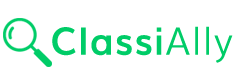
<style>
.page{position:relative;width:250px;height:80px;background:#ffffff}
.page>*{position:absolute;margin:0}
.t1{font:38px "Muli-Bold";letter-spacing:0.035em;color:#00cc67}
.t2{font:38px "Muli-Light";letter-spacing:0.035em;color:#00cc67}
</style>
<div class="page">
<p class="t1" style="left:52px;top:26px;width:181px;height:37px">Classi<span class="t2">Ally</span></p>
</div>
